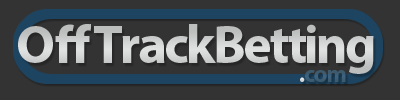
<style>
.page{position:relative;width:400px;height:100px;background:#333333}
.page>*{position:absolute;margin:0}
.t1{font:54.5px "MyriadPro-Bold";letter-spacing:-0.05em;color:#e0e2e2}
.t2{font:54.5px "MyriadPro-Bold";color:#e0e2e2}
.t3{font:54.5px "MyriadPro-Bold";letter-spacing:0.05em;color:#e0e2e2}
.t4{font:24px "MyriadPro-Bold";letter-spacing:-0.05em;color:#3e647e}
.t5{font:24px "MyriadPro-Bold";letter-spacing:-0.05em;color:#ffffff}
</style>
<div class="page">
<p class="t1" style="left:18px;top:24px;width:356px;height:50px"><span class="t2">O</span><span class="t3">ff</span>TrackBetting</p>
<p class="t4" style="left:300px;top:70px;width:46px;height:12px"><span class="t5">.</span>com</p>
</div>
